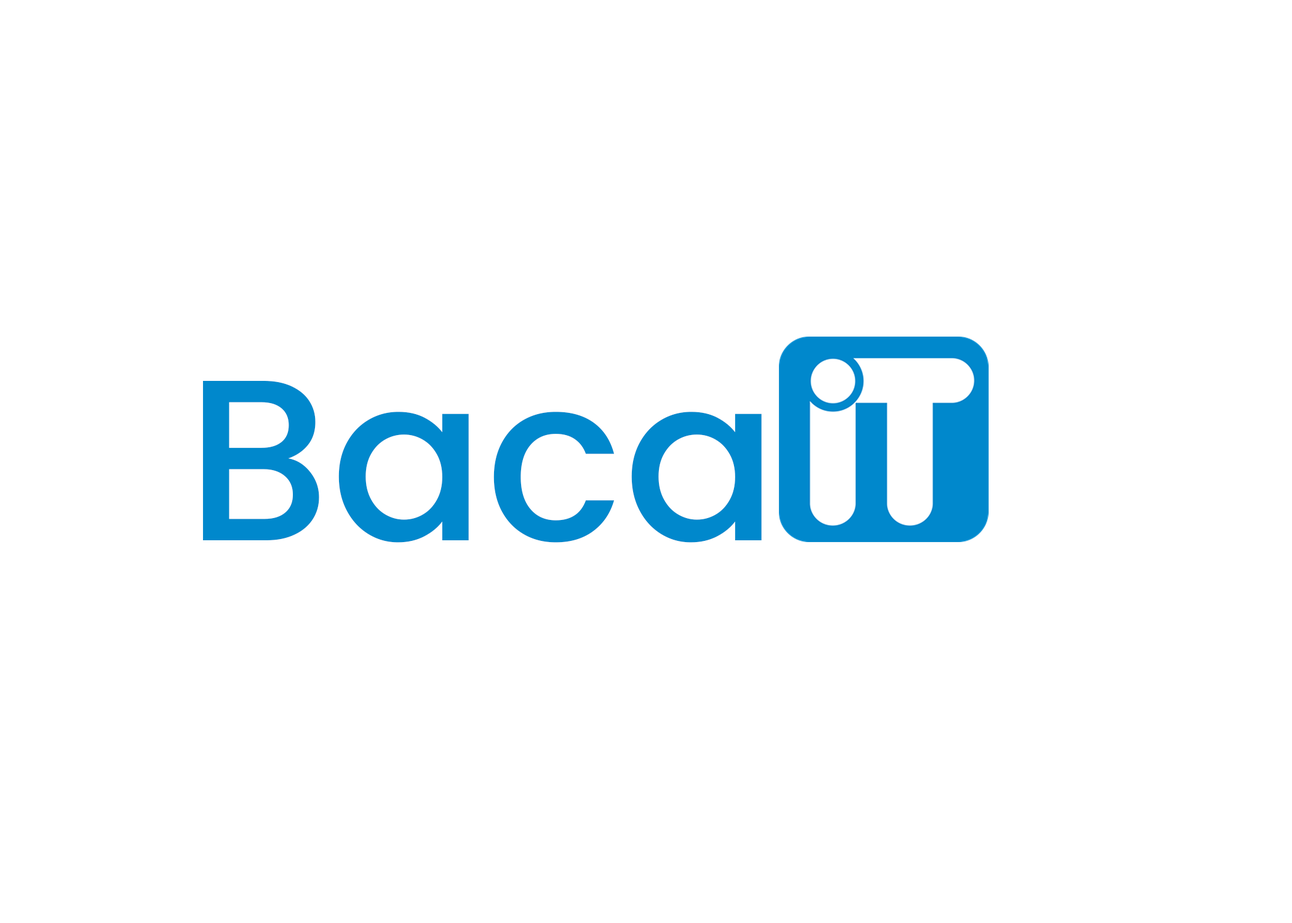
<style>
.page{position:relative;width:1292px;height:923px;background:#ffffff}
.page>*{position:absolute;margin:0}
.t1{font:229.3px "Poppins-Medium";color:#0088cc}
</style>
<div class="page">
<p class="t1" style="left:202px;top:381px;width:560px;height:162px">Baca</p>
</div>
